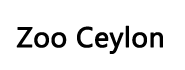
<style>
.page{position:relative;width:185px;height:70px;background:#ffffff}
.page>*{position:absolute;margin:0}
.t1{font:28px "Gadugi";color:#000000;font-weight:bold}
</style>
<div class="page">
<p class="t1" style="left:16px;top:25px;width:147px;height:29px">Zoo Ceylon</p>
</div>
